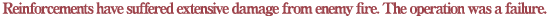
<style>
.page{position:relative;width:549px;height:18px;background:#ffffff}
.page>*{position:absolute;margin:0}
.t1{font:15px "RyuminPro-ExBold";letter-spacing:-0.1em;color:#9e444c}
</style>
<div class="page">
<p class="t1" style="left:2px;top:2px;width:545px;height:14px">Reinforcements have suffered extensive damage from enemy fire. The operation was a failure.</p>
</div>
